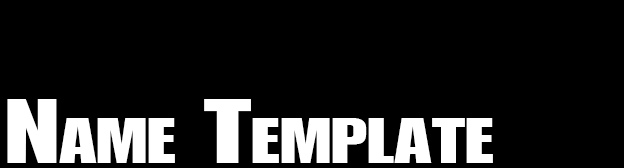
<style>
.page{position:relative;width:624px;height:168px;background:#000000}
.page>*{position:absolute;margin:0}
.t1{font:86.7px "Genuine";color:#ffffff;font-variant:small-caps;scale:1.34 1}
</style>
<div class="page">
<p class="t1" style="left:7px;top:99px;width:486px;height:64px">Name Template</p>
</div>
